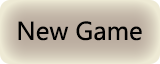
<style>
.page{position:relative;width:160px;height:64px}
.page>*{position:absolute;margin:0}
.t1{font:24px "MicrosoftYaHei";color:#000000}
</style>
<div class="page">
<p class="t1" style="left:18px;top:21px;width:124px;height:20px">New Game</p>
</div>
